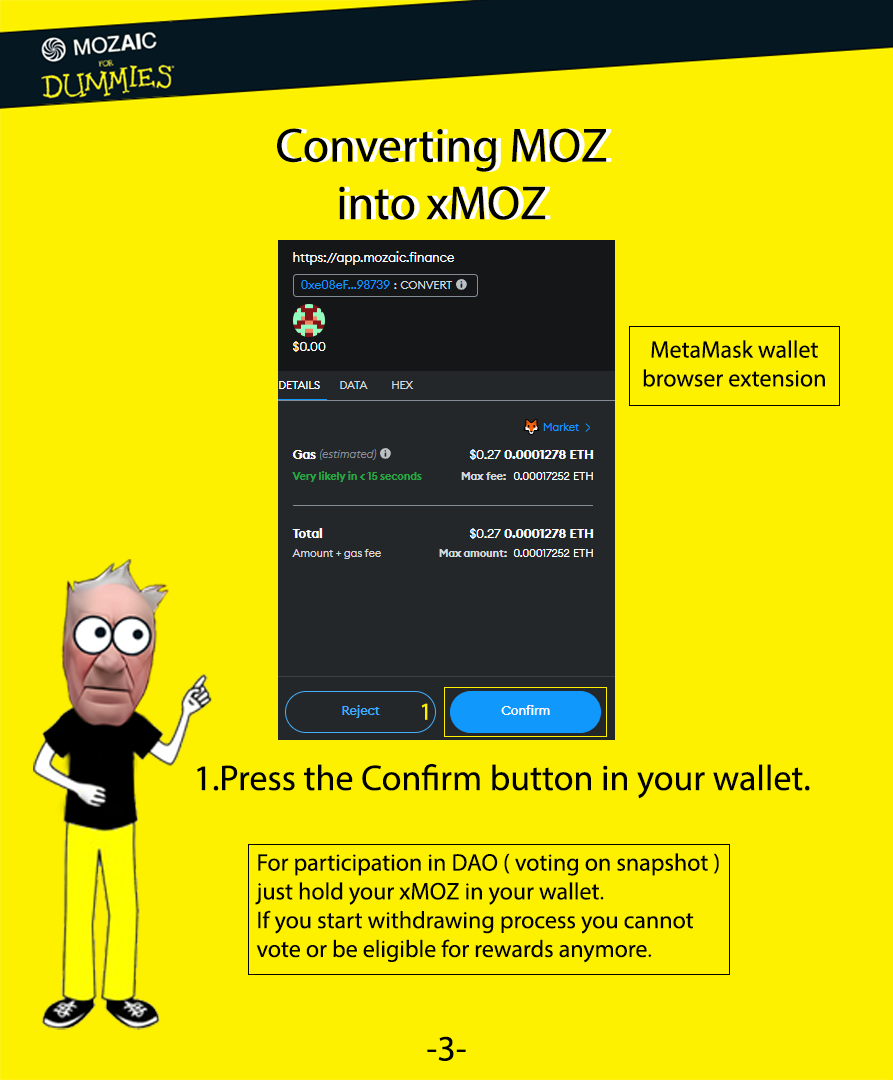
<style>
.page{position:relative;width:893px;height:1080px;background:#fdf100}
.page>*{position:absolute;margin:0}
.t1{font:48px "MyriadPro-Regular";color:#000000}
.t2{font:48px "MyriadPro-Regular";color:#ffffff}
.t3{font:24px "MyriadPro-Regular";color:#000000}
.t4{font:24px "MyriadPro-Regular";color:#fdf100}
.t5{font:36px "MyriadPro-Regular";color:#000000}
</style>
<div class="page">
<p class="t1" style="left:277px;top:128px;width:330px;height:92px;text-align:center">Converting MOZ <br>into xMOZ</p>
<p class="t2" style="left:282px;top:128px;width:330px;height:92px;text-align:center">Converting MOZ <br>into xMOZ</p>
<p class="t3" style="left:643px;top:340px;width:182px;height:47px;text-align:center">MetaMask wallet<br>browser extension</p>
<p class="t4" style="left:421px;top:703px;width:7px;height:17px">1</p>
<p class="t5" style="left:197px;top:764px;width:613px;height:35px">1.Press the Confirm button in your wallet.</p>
<p class="t3" style="left:255px;top:853px;width:464px;height:110px">For participation in DAO ( voting on snapshot )<br>just hold your xMOZ in your wallet.<br>If you start withdrawing process you cannot <br>vote or be eligible for rewards anymore.</p>
<p class="t5" style="left:427px;top:1036px;width:39px;height:25px;text-align:center">-3-<br>--</p>
</div>
